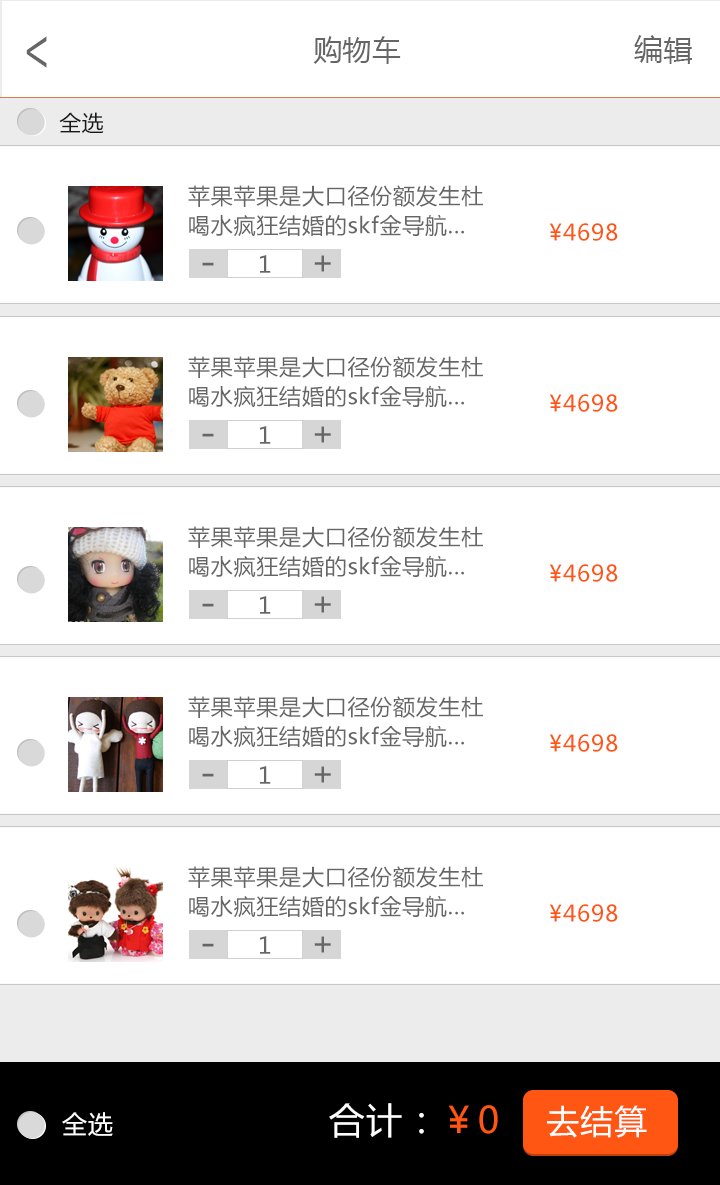
<style>
.page{position:relative;width:720px;height:1185px;background:#ffffff}
.page>*{position:absolute;margin:0}
.t1{font:51.9px "AdobeHeitiStd-Regular";color:#666666;scale:0.72 1}
.t2{font:29.2px "MicrosoftYaHei";color:#666666}
.t3{font:22px "MicrosoftYaHei";letter-spacing:0.035em;color:#191919}
.t4{font:22px/29.5px "MicrosoftYaHei";letter-spacing:0.035em;color:#666666}
.t5{font:22.6px "MicrosoftYaHei";letter-spacing:0.035em;color:#ff5614}
.t6{font:23px "MicrosoftYaHei";letter-spacing:0.035em;color:#666666}
.t7{font:32.1px "MicrosoftYaHei";letter-spacing:0.035em;color:#666666}
.t8{font:37.5px "MicrosoftYaHei";letter-spacing:0.035em;color:#666666}
.t9{font:36px "MicrosoftYaHei";letter-spacing:0.035em;color:#fffefe}
.t10{font:25px "MicrosoftYaHei";letter-spacing:0.035em;color:#fffefe}
.t11{font:36px "MicrosoftYaHei";letter-spacing:0.035em;color:#ff5614}
.t12{font:32.8px "MicrosoftYaHei";letter-spacing:0.035em;color:#fffefe}
</style>
<div class="page">
<p class="t1" style="left:26px;top:36px;width:21px;height:32px;rotate:180deg">&gt;</p>
<p class="t2" style="left:313px;top:36px;width:88px;height:28px">购物车</p>
<p class="t2" style="left:634px;top:35px;width:58px;height:29px">编辑</p>
<p class="t3" style="left:59px;top:112px;width:45px;height:22px">全选</p>
<p class="t4" style="left:188px;top:185px;width:295px;height:52px">苹果苹果是大口径份额发生杜<br>喝水疯狂结婚的skf金导航...</p>
<p class="t5" style="left:549px;top:223px;width:69px;height:18px">¥4698</p>
<p class="t6" style="left:260px;top:255px;width:11px;height:18px">1</p>
<p class="t7" style="left:314px;top:255px;width:17px;height:17px">+</p>
<p class="t8" style="left:202px;top:262px;width:12px;height:4px">-</p>
<p class="t4" style="left:188px;top:356px;width:295px;height:52px">苹果苹果是大口径份额发生杜<br>喝水疯狂结婚的skf金导航...</p>
<p class="t5" style="left:549px;top:394px;width:69px;height:18px">¥4698</p>
<p class="t8" style="left:202px;top:433px;width:12px;height:4px">-</p>
<p class="t6" style="left:260px;top:426px;width:11px;height:18px">1</p>
<p class="t7" style="left:314px;top:426px;width:17px;height:17px">+</p>
<p class="t4" style="left:188px;top:526px;width:295px;height:52px">苹果苹果是大口径份额发生杜<br>喝水疯狂结婚的skf金导航...</p>
<p class="t5" style="left:549px;top:564px;width:69px;height:18px">¥4698</p>
<p class="t8" style="left:202px;top:603px;width:12px;height:4px">-</p>
<p class="t6" style="left:260px;top:596px;width:11px;height:18px">1</p>
<p class="t7" style="left:314px;top:596px;width:17px;height:17px">+</p>
<p class="t4" style="left:188px;top:696px;width:295px;height:52px">苹果苹果是大口径份额发生杜<br>喝水疯狂结婚的skf金导航...</p>
<p class="t5" style="left:549px;top:734px;width:69px;height:18px">¥4698</p>
<p class="t8" style="left:202px;top:773px;width:12px;height:4px">-</p>
<p class="t6" style="left:260px;top:766px;width:11px;height:18px">1</p>
<p class="t7" style="left:314px;top:766px;width:17px;height:17px">+</p>
<p class="t4" style="left:188px;top:866px;width:295px;height:52px">苹果苹果是大口径份额发生杜<br>喝水疯狂结婚的skf金导航...</p>
<p class="t5" style="left:549px;top:904px;width:69px;height:18px">¥4698</p>
<p class="t6" style="left:260px;top:936px;width:11px;height:18px">1</p>
<p class="t7" style="left:314px;top:936px;width:17px;height:17px">+</p>
<p class="t8" style="left:202px;top:943px;width:12px;height:4px">-</p>
<p class="t9" style="left:62px;top:1103px;width:436px;height:35px"><span class="t10">全选                          </span>合计：<span class="t11">￥0</span></p>
<p class="t12" style="left:547px;top:1105px;width:100px;height:33px">去结算</p>
</div>
